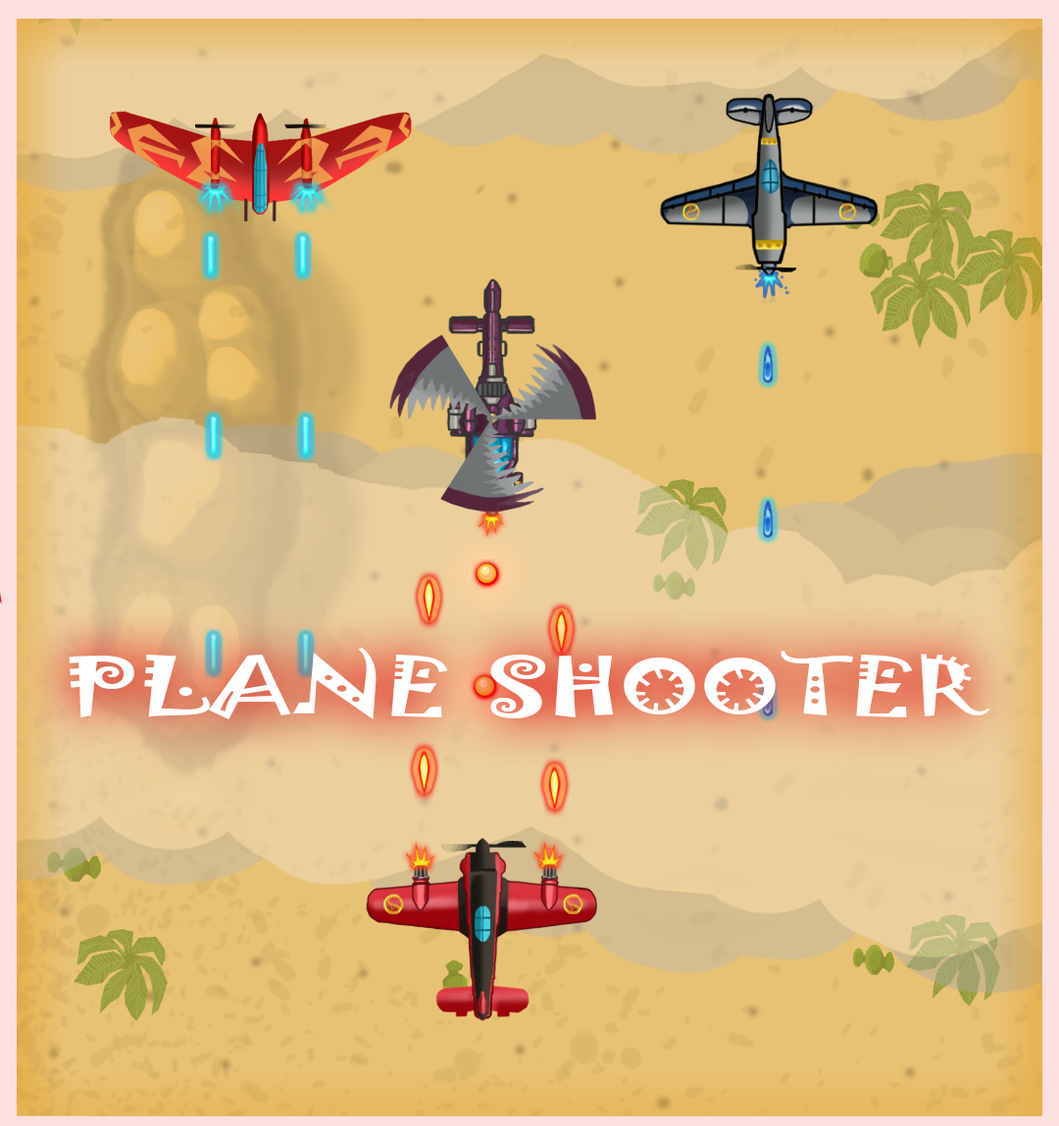
<style>
.page{position:relative;width:1059px;height:1126px;background:#e8c274}
.page>*{position:absolute;margin:0}
.t1{font:102.6px "Jokerman-Regular";color:#ffffff;font-variant:small-caps;scale:1.47 1}
</style>
<div class="page">
<p class="t1" style="left:69px;top:648px;width:920px;height:72px">plane shooter</p>
</div>
